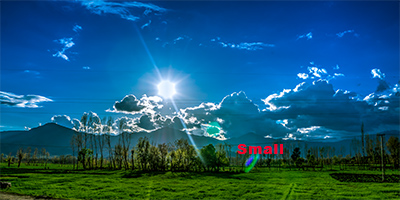
<style>
.page{position:relative;width:400px;height:200px}
.page>*{position:absolute;margin:0}
.t1{font:14px "Arial-Black";letter-spacing:0.075em;color:#f40029}
</style>
<div class="page">
<p class="t1" style="left:237px;top:144px;width:46px;height:10px">Small</p>
</div>
